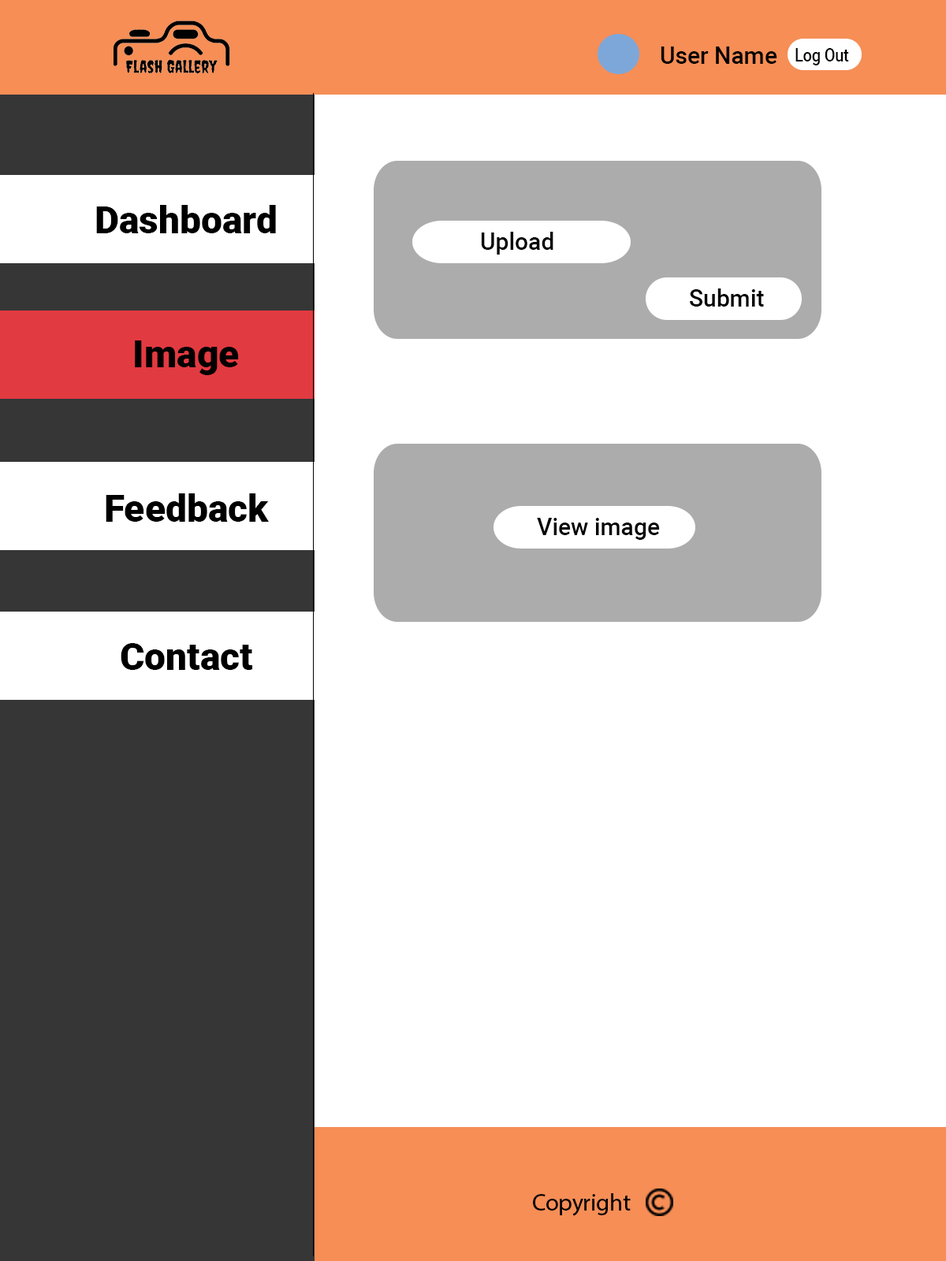
<style>
.page{position:relative;width:946px;height:1261px;background:#ffffff}
.page>*{position:absolute;margin:0}
.t1{font:23.6px "Roboto-Medium";color:#000000}
.t2{font:17.9px "Roboto-Medium";color:#000000;scale:0.86 1}
.t3{font:37.8px "Roboto-Black";color:#000000}
.t4{font:23.6px "Roboto-Medium";color:#030303}
.t5{font:23.8px "MyriadHebrew-Regular";color:#000000}
</style>
<div class="page">
<p class="t1" style="left:660px;top:46px;width:117px;height:18px">User Name</p>
<p class="t2" style="left:795px;top:48px;width:54px;height:17px">Log Out</p>
<p class="t3" style="left:96px;top:205px;width:180px;height:28px">Dashboard</p>
<p class="t4" style="left:481px;top:232px;width:72px;height:23px">Upload</p>
<p class="t4" style="left:690px;top:288px;width:74px;height:19px">Submit</p>
<p class="t3" style="left:135px;top:340px;width:104px;height:35px">Image</p>
<p class="t3" style="left:106px;top:493px;width:163px;height:29px">Feedback</p>
<p class="t4" style="left:537px;top:518px;width:123px;height:22px">View image</p>
<p class="t3" style="left:121px;top:643px;width:131px;height:27px">Contact</p>
<p class="t5" style="left:533px;top:1193px;width:97px;height:23px">Copyright</p>
</div>
